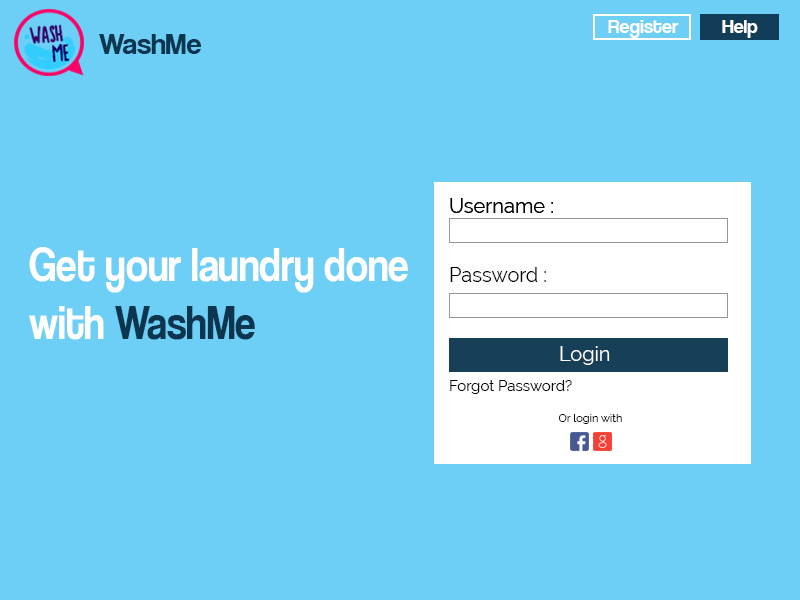
<style>
.page{position:relative;width:800px;height:600px;background:#6dcff6}
.page>*{position:absolute;margin:0}
.t1{font:20px "CoolveticaRg-Regular";color:#ffffff}
.t2{font:30px "CoolveticaRg-Regular";color:#0c354f}
.t3{font:20px "Raleway";color:#000000}
.t4{font:48px "CoolveticaRg-Regular";color:#ffffff;scale:0.86 1}
.t5{font:48px "CoolveticaRg-Regular";color:#0c354f;scale:0.86 1}
.t6{font:20px "Raleway";color:#ffffff}
.t7{font:15px "Raleway";color:#000000}
.t8{font:11px "Raleway";color:#000000}
</style>
<div class="page">
<p class="t1" style="left:608px;top:20px;width:71px;height:18px">Register</p>
<p class="t1" style="left:722px;top:20px;width:36px;height:18px">Help</p>
<p class="t2" style="left:99px;top:34px;width:102px;height:20px">WashMe</p>
<p class="t3" style="left:450px;top:198px;width:103px;height:15px">Username :</p>
<p class="t3" style="left:450px;top:198px;width:103px;height:15px">Username :</p>
<p class="t4" style="left:29px;top:247px;width:379px;height:93px">Get your laundry done<br>with <span class="t5">WashMe</span></p>
<p class="t3" style="left:450px;top:267px;width:96px;height:15px">Password :</p>
<p class="t6" style="left:560px;top:346px;width:50px;height:19px">Login</p>
<p class="t7" style="left:450px;top:380px;width:122px;height:14px">Forgot Password?</p>
<p class="t8" style="left:558px;top:414px;width:64px;height:10px">Or login with</p>
</div>
